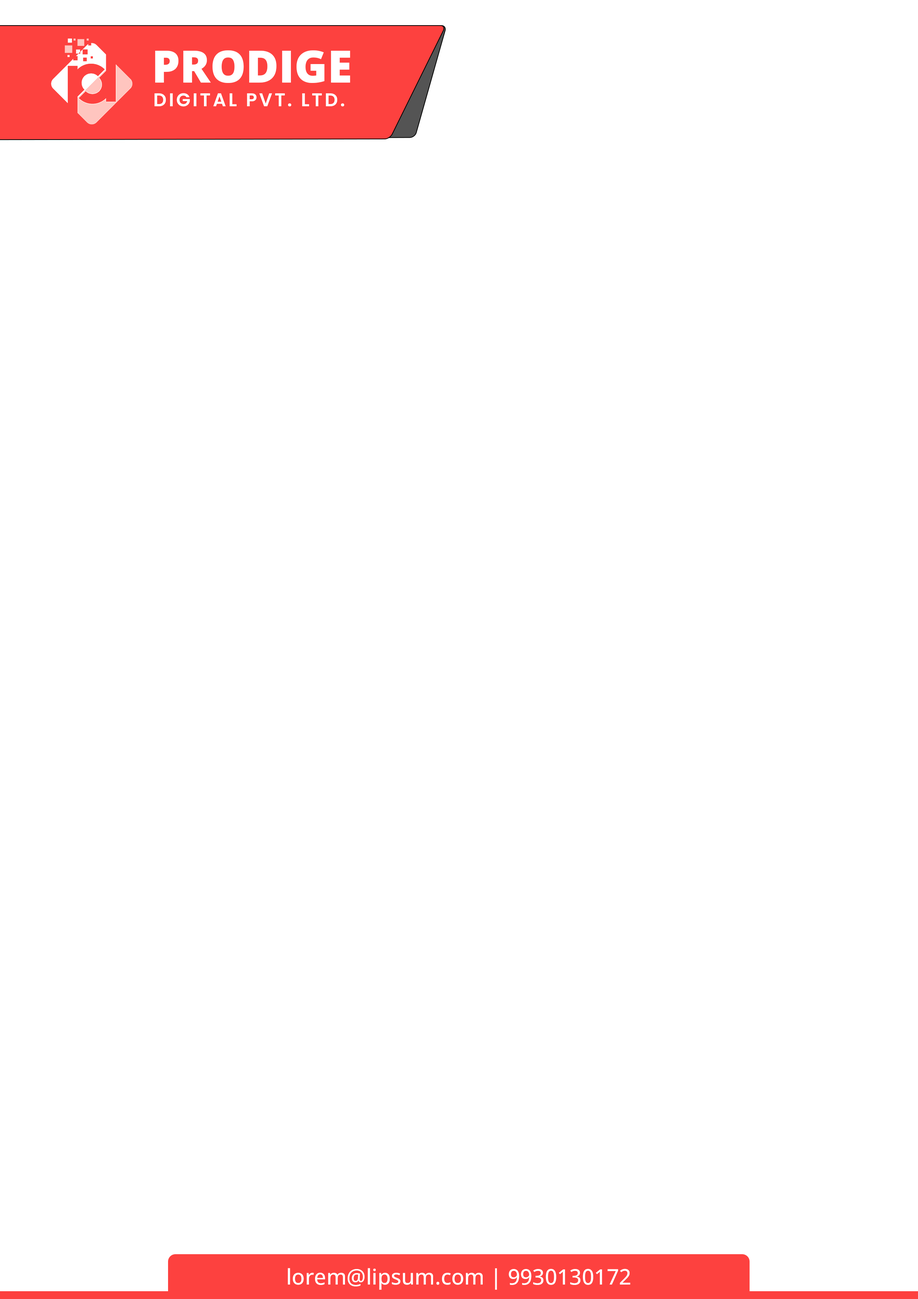
<style>
.page{position:relative;width:918px;height:1299px;background:#ffffff}
.page>*{position:absolute;margin:0}
.t1{font:44.7px "OpenSans-ExtraBold";color:#ffffff}
.t2{font:18.5px "Poppins-SemiBold";letter-spacing:0.12em;color:#ffffff}
.t3{font:21.6px "OpenSans-Medium";color:#ffffff}
</style>
<div class="page">
<p class="t1" style="left:155px;top:50px;width:195px;height:33px">PRODIGE</p>
<p class="t2" style="left:154px;top:93px;width:190px;height:14px">DIGITAL PVT. LTD.</p>
<p class="t3" style="left:288px;top:1268px;width:342px;height:21px">lorem@lipsum.com | 9930130172</p>
</div>
